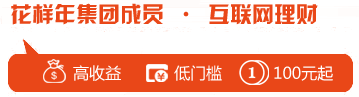
<style>
.page{position:relative;width:359px;height:97px;background:#ffffff}
.page>*{position:absolute;margin:0}
.t1{font:22px "HYk2gj";color:#e94718}
.t2{font:16px "MicrosoftYaHei";color:#ffffff}
</style>
<div class="page">
<p class="t1" style="left:11px;top:3px;width:307px;height:22px">花样年集团成员 · 互联网理财</p>
<p class="t2" style="left:73px;top:65px;width:48px;height:16px">高收益</p>
<p class="t2" style="left:174px;top:65px;width:48px;height:16px">低门槛</p>
<p class="t2" style="left:274px;top:65px;width:59px;height:16px">100元起</p>
</div>
